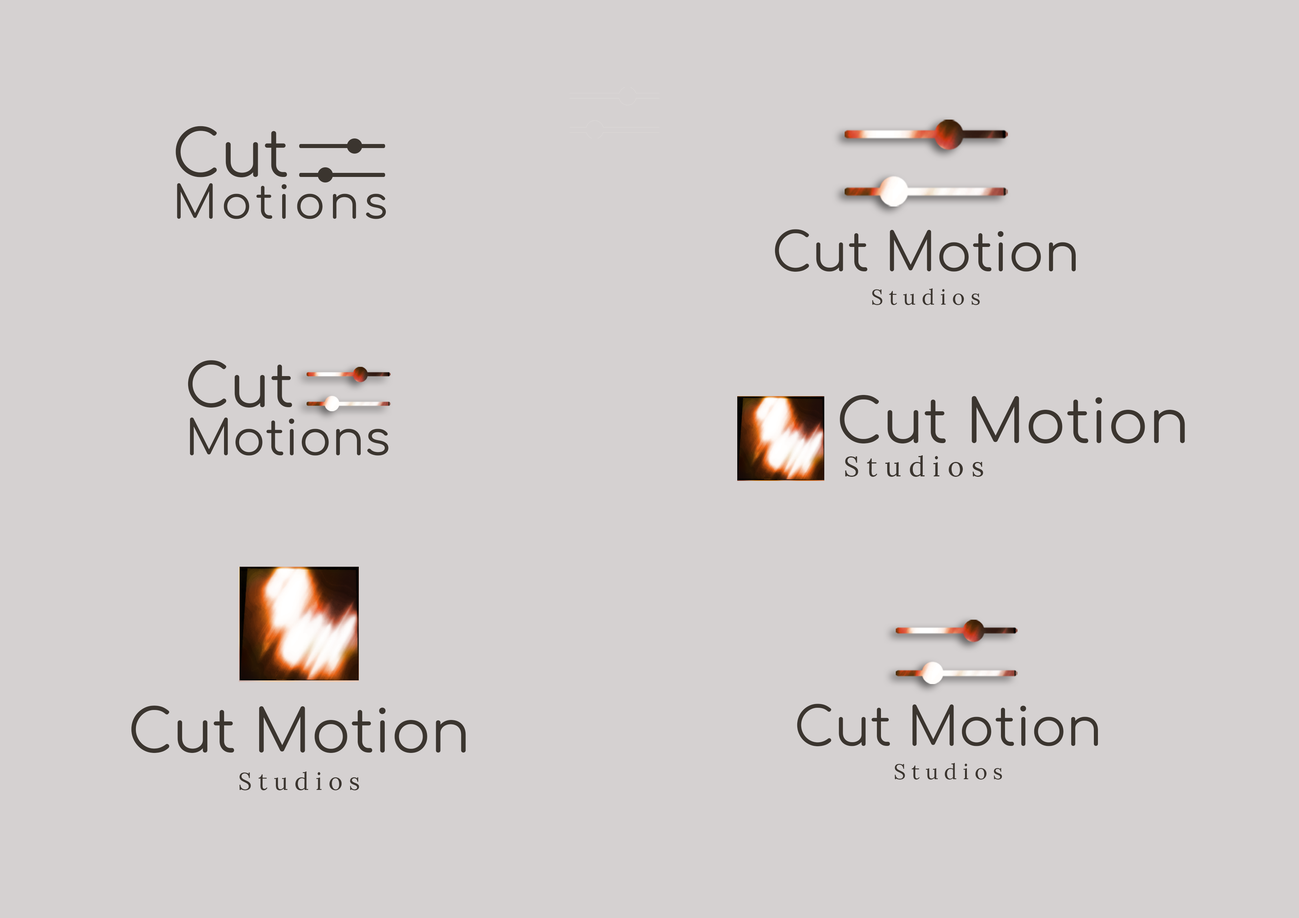
<style>
.page{position:relative;width:1299px;height:918px;background:#d5d1d1}
.page>*{position:absolute;margin:0}
.t1{font:63.5px "Comfortaa-Regular";color:#3b352f}
.t2{font:45.5px "Comfortaa-Regular";letter-spacing:0.08em;color:#3b352f}
.t3{font:52.7px/77.8px "Comfortaa-Regular";color:#3b352f}
.t4{font:21.8px/33.4px "Lora-Regular";letter-spacing:0.26em;color:#3b352f}
.t5{font:59.2px "Comfortaa-Regular";color:#3b352f}
.t6{font:60.5px "Comfortaa-Regular";color:#3b352f}
.t7{font:48.4px "Comfortaa-Regular";color:#3b352f}
.t8{font:28px "Lora-Regular";letter-spacing:0.26em;color:#3b352f}
.t9{font:58.6px/86.6px "Comfortaa-Regular";color:#3b352f}
.t10{font:24.2px/37.2px "Lora-Regular";letter-spacing:0.26em;color:#3b352f}
</style>
<div class="page">
<p class="t1" style="left:175px;top:126px;width:112px;height:51px">Cut</p>
<p class="t2" style="left:177px;top:183px;width:209px;height:36px">Motions</p>
<p class="t3" style="left:775px;top:229px;width:300px;height:76px;text-align:center">Cut Motion<br><span class="t4">Studios</span></p>
<p class="t5" style="left:188px;top:360px;width:104px;height:48px">Cut</p>
<p class="t6" style="left:840px;top:395px;width:345px;height:49px">Cut Motion</p>
<p class="t7" style="left:190px;top:418px;width:198px;height:38px">Motions</p>
<p class="t8" style="left:845px;top:455px;width:138px;height:22px">Studios</p>
<p class="t9" style="left:131px;top:706px;width:335px;height:84px;text-align:center">Cut Motion<br><span class="t10">Studios</span></p>
<p class="t3" style="left:797px;top:704px;width:301px;height:76px;text-align:center">Cut Motion<br><span class="t4">Studios</span></p>
</div>
